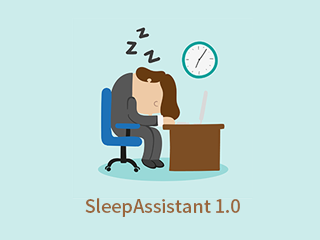
<style>
.page{position:relative;width:320px;height:240px;background:#cceceb}
.page>*{position:absolute;margin:0}
.t1{font:18px "SourceHanSansSC-Medium";color:#9a663c}
</style>
<div class="page">
<p class="t1" style="left:85px;top:198px;width:155px;height:19px">SleepAssistant 1.0</p>
</div>
